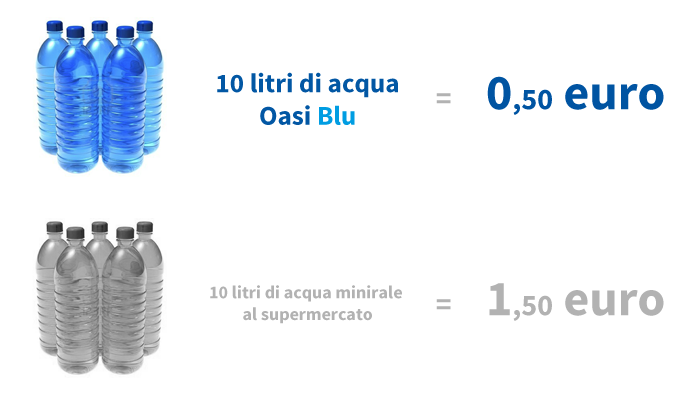
<style>
.page{position:relative;width:693px;height:404px;background:#ffffff}
.page>*{position:absolute;margin:0}
.t1{font:27px "SourceSansPro-Bold";color:#0257a4}
.t2{font:27px "SourceSansPro-Bold";color:#009de2}
.t3{font:50px "SourceSansPro-Bold";color:#0054a2}
.t4{font:30px "SourceSansPro-Bold";color:#0054a2}
.t5{font:30px "SourceSansPro-Bold";color:#b2b2b2}
.t6{font:18px "SourceSansPro-Bold";color:#b2b2b2}
.t7{font:50px "SourceSansPro-Bold";color:#b2b2b2}
</style>
<div class="page">
<p class="t1" style="left:217px;top:72px;width:181px;height:53px;text-align:center">10 litri di acqua<br>Oasi <span class="t2">Blu</span></p>
<p class="t3" style="left:487px;top:76px;width:177px;height:39px">0<span class="t4">,50</span> euro</p>
<p class="t5" style="left:436px;top:93px;width:15px;height:11px">=</p>
<p class="t6" style="left:210px;top:285px;width:192px;height:39px;text-align:center">10 litri di acqua minirale <br>al supermercato</p>
<p class="t7" style="left:489px;top:283px;width:175px;height:38px">1<span class="t5">,50</span> euro</p>
<p class="t5" style="left:436px;top:299px;width:15px;height:11px">=</p>
</div>
